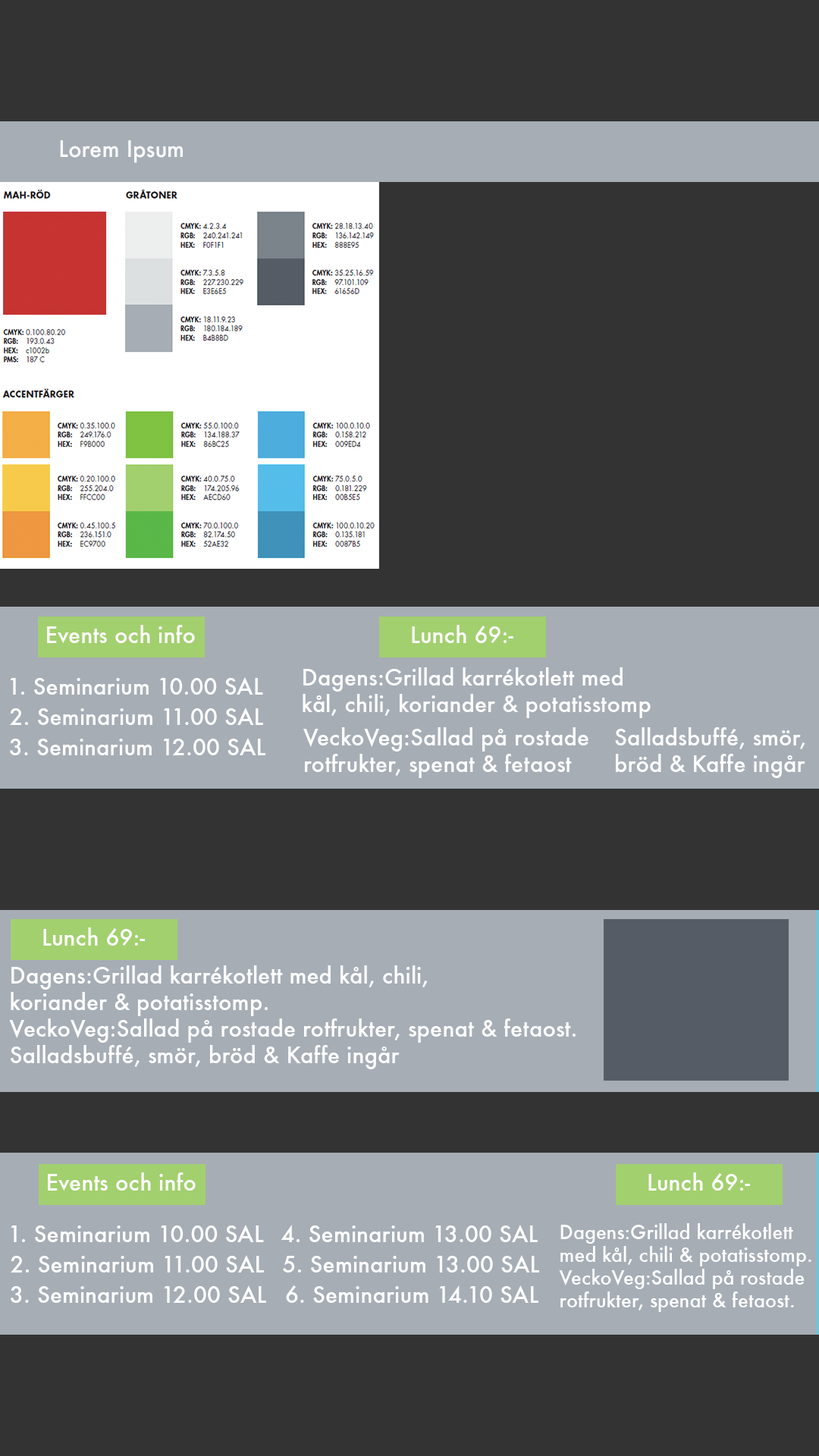
<style>
.page{position:relative;width:819px;height:1456px;background:#333333}
.page>*{position:absolute;margin:0}
.t1{font:22.1px "Futura-Medium";color:#fbfbfb}
.t2{font:22.1px "Futura-Medium";color:#ffffff}
.t3{font:19px "Futura-Medium";color:#ffffff}
</style>
<div class="page">
<p class="t1" style="left:60px;top:140px;width:123px;height:23px">Lorem Ipsum</p>
<p class="t2" style="left:47px;top:625px;width:148px;height:18px">Events och info</p>
<p class="t2" style="left:412px;top:625px;width:101px;height:18px">Lunch 69:-</p>
<p class="t2" style="left:10px;top:677px;width:253px;height:18px">1. Seminarium 10.00 SAL</p>
<p class="t2" style="left:303px;top:667px;width:348px;height:51px">Dagens:Grillad karrékotlett med<br>kål, chili, koriander &amp; potatisstomp</p>
<p class="t2" style="left:10px;top:708px;width:253px;height:17px">2. Seminarium 11.00 SAL</p>
<p class="t2" style="left:10px;top:738px;width:255px;height:17px">3. Seminarium 12.00 SAL</p>
<p class="t2" style="left:303px;top:727px;width:285px;height:51px">VeckoVeg:Sallad på rostade <br>rotfrukter, spenat &amp; fetaost</p>
<p class="t2" style="left:615px;top:727px;width:190px;height:51px">Salladsbuffé, smör, <br>bröd &amp; Kaffe ingår</p>
<p class="t2" style="left:43px;top:927px;width:102px;height:19px">Lunch 69:-</p>
<p class="t2" style="left:9px;top:965px;width:567px;height:104px">Dagens:Grillad karrékotlett med kål, chili, <br>koriander &amp; potatisstomp.<br>VeckoVeg:Sallad på rostade rotfrukter, spenat &amp; fetaost.<br>Salladsbuffé, smör, bröd &amp; Kaffe ingår</p>
<p class="t2" style="left:48px;top:1172px;width:148px;height:19px">Events och info</p>
<p class="t2" style="left:648px;top:1172px;width:102px;height:19px">Lunch 69:-</p>
<p class="t2" style="left:11px;top:1225px;width:253px;height:17px">1. Seminarium 10.00 SAL</p>
<p class="t2" style="left:281px;top:1225px;width:257px;height:17px">4. Seminarium 13.00 SAL</p>
<p class="t3" style="left:559px;top:1223px;width:252px;height:89px">Dagens:Grillad karrékotlett <br>med kål, chili &amp; potatisstomp.<br>VeckoVeg:Sallad på rostade <br>rotfrukter, spenat &amp; fetaost.</p>
<p class="t2" style="left:11px;top:1255px;width:253px;height:17px">2. Seminarium 11.00 SAL</p>
<p class="t2" style="left:283px;top:1255px;width:256px;height:17px">5. Seminarium 13.00 SAL</p>
<p class="t2" style="left:11px;top:1285px;width:255px;height:18px">3. Seminarium 12.00 SAL</p>
<p class="t2" style="left:286px;top:1285px;width:252px;height:18px">6. Seminarium 14.10 SAL</p>
</div>
